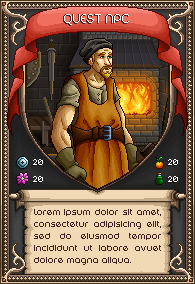
<style>
.page{position:relative;width:195px;height:284px}
.page>*{position:absolute;margin:0}
.t1{font:14px "DigitalDisco-Thin";color:#3f2222;text-transform:uppercase}
.t2{font:14px "DigitalDisco-Thin";color:#ffffff;text-transform:uppercase}
.t3{font:9px "DigitalDisco-Thin";color:#ffffff;text-transform:uppercase}
.t4{font:10px "DigitalDisco-Thin";color:#3f2222}
</style>
<div class="page">
<p class="t1" style="left:63px;top:14px;width:65px;height:11px">quest npc</p>
<p class="t2" style="left:64px;top:14px;width:65px;height:11px">quest npc</p>
<p class="t3" style="left:33px;top:159px;width:10px;height:6px">20</p>
<p class="t3" style="left:168px;top:159px;width:10px;height:6px">20</p>
<p class="t3" style="left:33px;top:176px;width:10px;height:6px">20</p>
<p class="t3" style="left:168px;top:176px;width:10px;height:6px">20</p>
<p class="t4" style="left:34px;top:209px;width:127px;height:56px;text-align:justify">Lorem ipsum dolor sit amet, consectetur adipisicing elit, sed do eiusmod tempor incididunt ut labore avuet dolore magna aliqua.</p>
</div>
